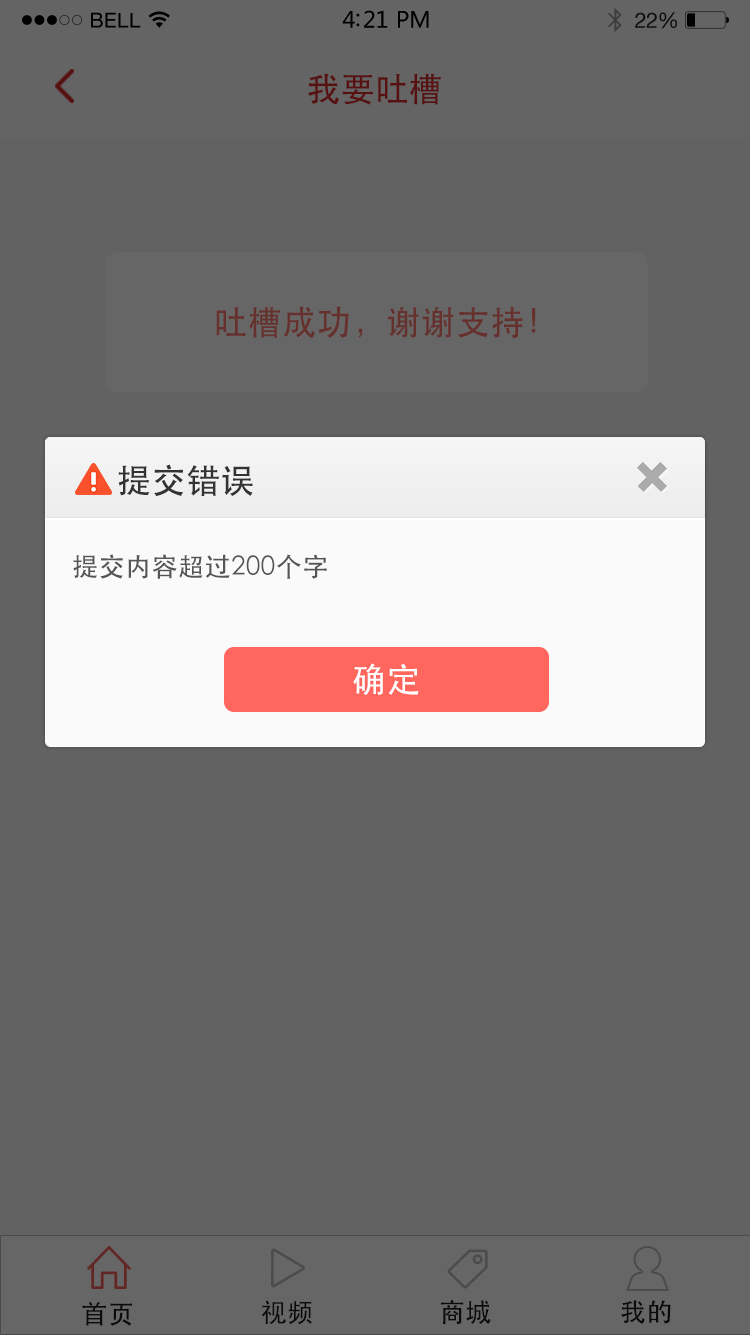
<style>
.page{position:relative;width:750px;height:1335px;background:#626262}
.page>*{position:absolute;margin:0}
.t1{font:34px "STHeiti";color:#571111}
.t2{font:34px "STHeiti";letter-spacing:0.02em;color:#66302c}
.t3{font:34px "STHeiti";letter-spacing:0.02em;color:#333333}
.t4{font:26px "STHeiti";letter-spacing:0.02em;color:#555555}
.t5{font:34px "STHeiti";letter-spacing:0.02em;color:#ffffff}
.t6{font:26px "STHeiti";letter-spacing:0.02em;color:#1b1b1b}
</style>
<div class="page">
<p class="t1" style="left:308px;top:73px;width:133px;height:32px">我要吐槽</p>
<p class="t2" style="left:216px;top:306px;width:320px;height:33px">吐槽成功，谢谢支持！</p>
<p class="t3" style="left:118px;top:464px;width:135px;height:32px">提交错误</p>
<p class="t4" style="left:73px;top:554px;width:254px;height:25px">提交内容超过200个字</p>
<p class="t5" style="left:353px;top:663px;width:66px;height:32px">确定</p>
<p class="t6" style="left:82px;top:1301px;width:50px;height:25px">首页</p>
<p class="t6" style="left:261px;top:1300px;width:51px;height:25px">视频</p>
<p class="t6" style="left:441px;top:1300px;width:50px;height:24px">商城</p>
<p class="t6" style="left:621px;top:1300px;width:50px;height:24px">我的</p>
</div>
